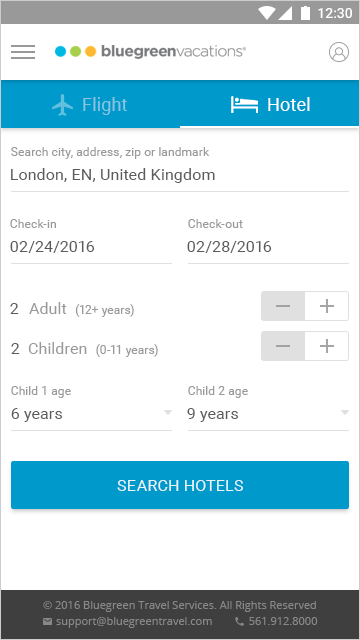
<style>
.page{position:relative;width:360px;height:640px;background:#ffffff}
.page>*{position:absolute;margin:0}
.t1{font:18px "Roboto-Regular";letter-spacing:0.01em;color:#88c4e0}
.t2{font:18px "Roboto-Regular";letter-spacing:0.01em;color:#ffffff}
.t3{font:12px "Roboto-Regular";letter-spacing:0.01em;color:#999999}
.t4{font:16px "Roboto-Regular";letter-spacing:0.01em;color:#5b5b5b}
.t5{font:16px "Roboto-Regular";letter-spacing:0.01em;color:#999999}
.t6{font:16px "Roboto-Regular";letter-spacing:0.01em;color:#ffffff;text-transform:uppercase}
</style>
<div class="page">
<p class="t1" style="left:83px;top:97px;width:44px;height:18px">Flight</p>
<p class="t2" style="left:268px;top:97px;width:42px;height:14px">Hotel</p>
<p class="t3" style="left:11px;top:147px;width:199px;height:12px">Search city, address, zip or landmark</p>
<p class="t4" style="left:11px;top:168px;width:204px;height:15px">London, EN, United Kingdom</p>
<p class="t3" style="left:10px;top:219px;width:46px;height:9px">Check-in</p>
<p class="t3" style="left:188px;top:219px;width:55px;height:9px">Check-out</p>
<p class="t4" style="left:10px;top:241px;width:85px;height:12px">02/24/2016</p>
<p class="t4" style="left:187px;top:241px;width:85px;height:12px">02/28/2016</p>
<p class="t4" style="left:10px;top:303px;width:9px;height:11px">2</p>
<p class="t3" style="left:29px;top:302px;width:105px;height:15px"><span class="t5">Adult  </span>(12+ years)</p>
<p class="t3" style="left:28px;top:342px;width:130px;height:15px"><span class="t5">Children  </span>(0-11 years)</p>
<p class="t4" style="left:11px;top:343px;width:9px;height:11px">2</p>
<p class="t3" style="left:11px;top:386px;width:60px;height:12px">Child 1 age</p>
<p class="t3" style="left:188px;top:386px;width:60px;height:12px">Child 2 age</p>
<p class="t4" style="left:11px;top:408px;width:51px;height:14px">6 years</p>
<p class="t4" style="left:187px;top:408px;width:51px;height:14px">9 years</p>
<p class="t6" style="left:117px;top:480px;width:126px;height:11px;opacity:0.87">Search hotels</p>
</div>
